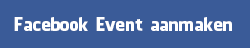
<style>
.page{position:relative;width:250px;height:48px;background:#3a5b98}
.page>*{position:absolute;margin:0}
.t1{font:18px "FacebookLetterFaces";color:#ffffff}
</style>
<div class="page">
<p class="t1" style="left:14px;top:17px;width:218px;height:14px">Facebook Event aanmaken</p>
</div>
